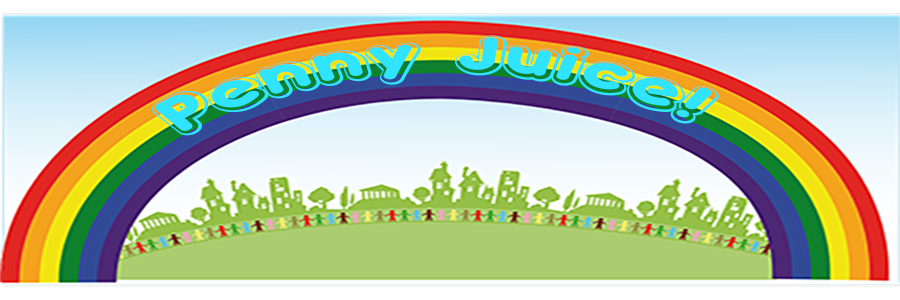
<style>
.page{position:relative;width:900px;height:300px}
.page>*{position:absolute;margin:0}
.t1{font:56.3px "DoubleBubbleShadow";color:#30e3ff;scale:1.5 1}
</style>
<div class="page">
<p class="t1" style="left:152px;top:35px;width:567px;height:101px;text-align:center">Penny Juice!</p>
</div>
